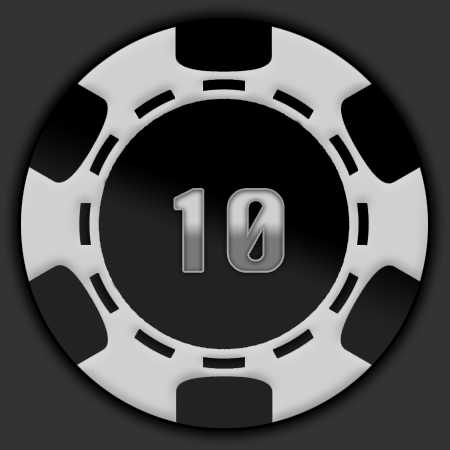
<style>
.page{position:relative;width:450px;height:450px;background:#333333}
.page>*{position:absolute;margin:0}
.t1{font:107.3px "Krungthep"}
</style>
<div class="page">
<p class="t1" style="left:175px;top:190px;width:108px;height:81px">10</p>
</div>
